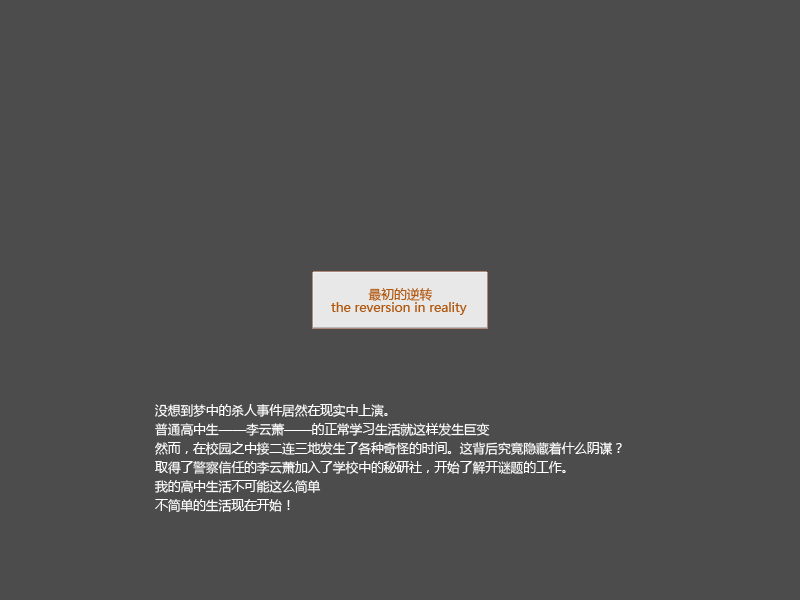
<style>
.page{position:relative;width:800px;height:600px;background:#4c4c4c}
.page>*{position:absolute;margin:0}
.t1{font:12.7px/6.3px "MicrosoftYaHei";color:#b25910}
.t2{font:12.7px/6.3px "MicrosoftYaHei";color:#ffffff}
</style>
<div class="page">
<p class="t1" style="left:331px;top:288px;width:136px;height:27px">最初的逆转<br><br>the reversion in reality</p>
<p class="t2" style="left:154px;top:404px;width:468px;height:108px">没想到梦中的杀人事件居然在现实中上演。<br><br><br>普通高中生——李云萧——的正常学习生活就这样发生巨变<br><br><br>然而，在校园之中接二连三地发生了各种奇怪的时间。这背后究竟隐藏着什么阴谋？<br><br><br>取得了警察信任的李云萧加入了学校中的秘研社，开始了解开谜题的工作。<br><br><br>我的高中生活不可能这么简单<br><br><br>不简单的生活现在开始！</p>
</div>
